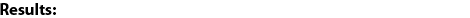
<style>
.page{position:relative;width:470px;height:18px;background:#ffffff}
.page>*{position:absolute;margin:0}
.t1{font:16.5px "MyriadPro-Bold";color:#000000}
</style>
<div class="page">
<p class="t1" style="left:0px;top:3px;width:56px;height:12px">Results:</p>
</div>
